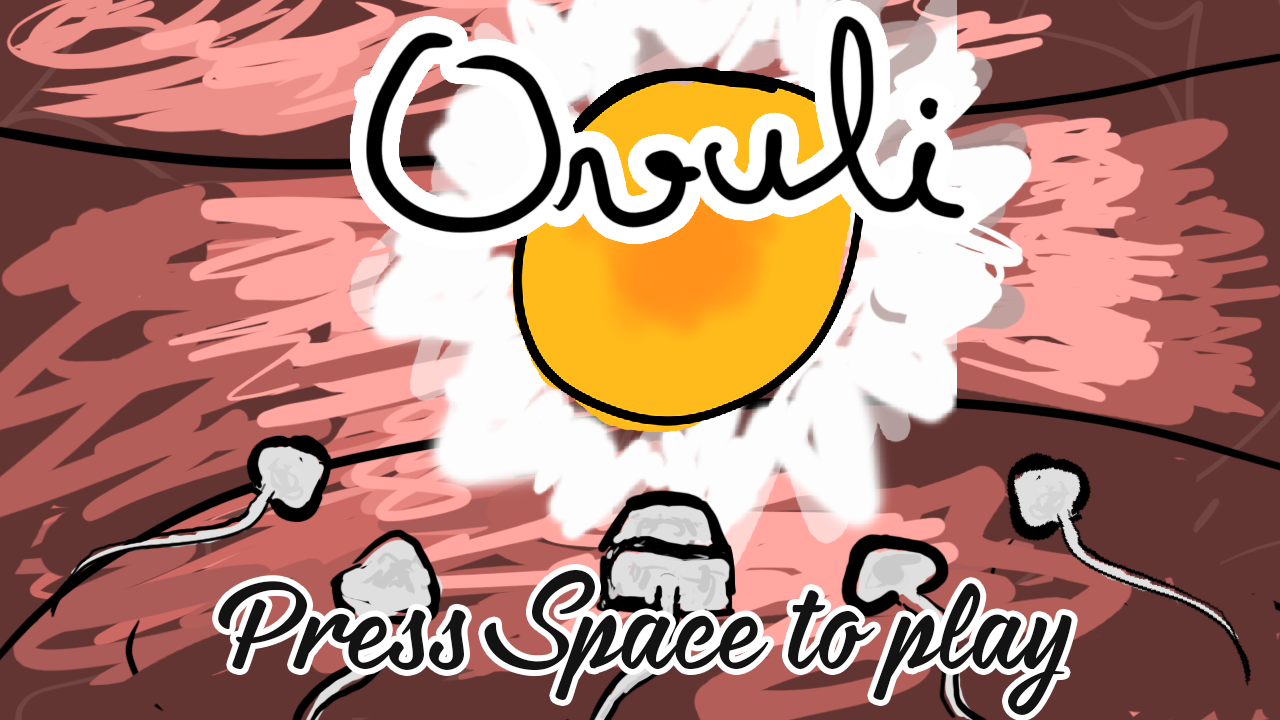
<style>
.page{position:relative;width:1280px;height:720px;background:#623432}
.page>*{position:absolute;margin:0}
.t1{font:100.5px "Hontana";color:#131313}
</style>
<div class="page">
<p class="t1" style="left:218px;top:570px;width:854px;height:145px">Press Space to play</p>
</div>
